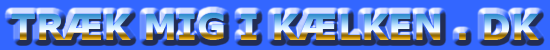
<style>
.page{position:relative;width:550px;height:50px;background:#3366ff}
.page>*{position:absolute;margin:0}
.t1{font:36px "Verdana-Bold"}
</style>
<div class="page">
<p class="t1" style="left:11px;top:13px;width:528px;height:27px">TRÆK MIG I KÆLKEN . DK</p>
</div>
